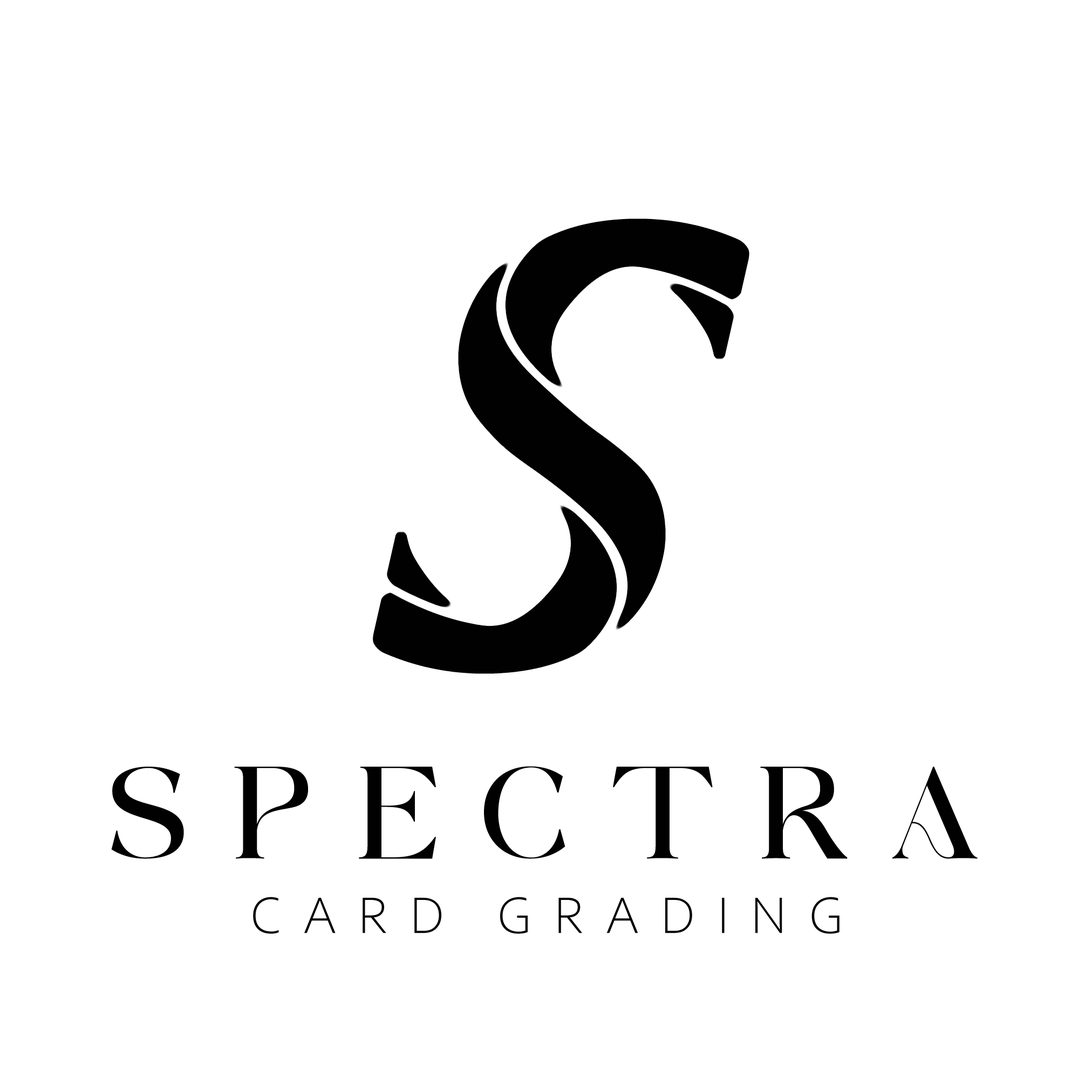
<style>
.page{position:relative;width:1092px;height:1092px;background:#ffffff}
.page>*{position:absolute;margin:0}
.t1{font:107.9px "against-Regular";letter-spacing:0.4em;color:#010101}
.t2{font:54px "CorbelLight";letter-spacing:0.4em;color:#010101}
</style>
<div class="page">
<p class="t1" style="left:111px;top:766px;width:867px;height:93px">SPECTRA</p>
<p class="t2" style="left:253px;top:897px;width:586px;height:37px">CARD GRADING</p>
</div>
